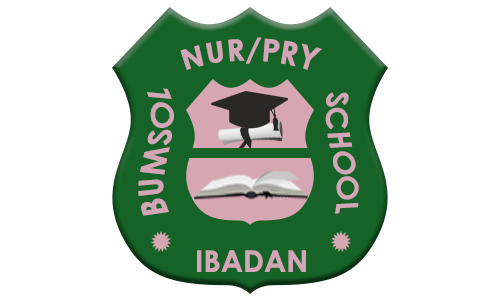
<style>
.page{position:relative;width:500px;height:300px;background:#ffffff}
.page>*{position:absolute;margin:0}
.t1{font:30px "CenturyGothic-Bold";color:#d2a6b7}
.t2{font:32.8px "CenturyGothic-Bold";color:#d2a6b7}
</style>
<div class="page">
<p class="t1" style="left:180px;top:37px;width:142px;height:33px">NUR/PRY</p>
<p class="t2" style="left:138px;top:88px;width:36px;height:128px;rotate:-91deg">BUMSOL</p>
<p class="t1" style="left:325px;top:92px;width:34px;height:122px;rotate:87deg">SCHOOL</p>
<p class="t1" style="left:197px;top:250px;width:109px;height:22px">IBADAN</p>
</div>
